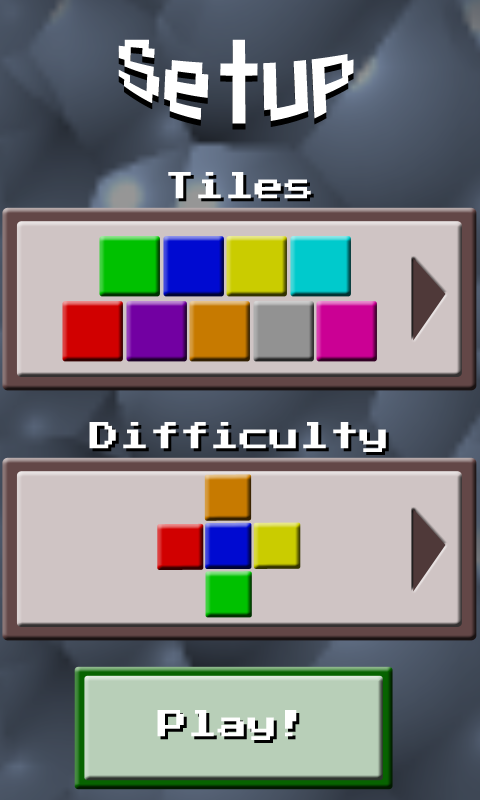
<style>
.page{position:relative;width:480px;height:800px;background:#cfc4c4}
.page>*{position:absolute;margin:0}
.t1{font:48px "PressStart2P";color:#ffffff}
.t2{font:30px "PressStart2P";color:#ffffff}
.t3{font:30px "PressStart2P"}
</style>
<div class="page">
<p class="t1" style="left:118px;top:39px;width:236px;height:85px;text-align:center">Setup</p>
<p class="t1" style="left:118px;top:45px;width:236px;height:85px;text-align:center">Setup</p>
<p class="t2" style="left:168px;top:172px;width:143px;height:27px">Tiles</p>
<p class="t2" style="left:89px;top:422px;width:297px;height:30px">Difficulty</p>
<p class="t2" style="left:157px;top:710px;width:140px;height:30px">Play!</p>
<p class="t3" style="left:160px;top:713px;width:140px;height:30px">Play!</p>
</div>
